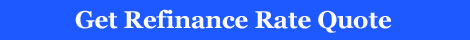
<style>
.page{position:relative;width:470px;height:40px;background:#1e59ff}
.page>*{position:absolute;margin:0}
.t1{font:24px "Georgia-Bold";color:#fbfaff}
</style>
<div class="page">
<p class="t1" style="left:75px;top:9px;width:317px;height:24px">Get Refinance Rate Quote</p>
</div>
